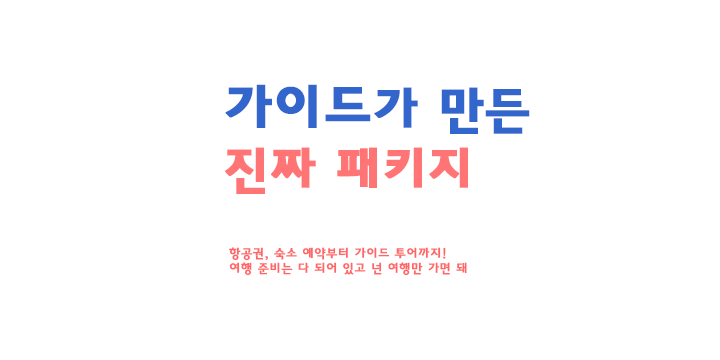
<style>
.page{position:relative;width:720px;height:360px;background:#ffffff}
.page>*{position:absolute;margin:0}
.t1{font:50px "HaanYGodic25";color:#ff7474;font-weight:bold}
.t2{font:53.6px "HaanYGodic25";color:#3366cc;font-weight:bold}
.t3{font:50px "HaanYGodic25";color:#3366cc;font-weight:bold}
.t4{font:12.7px "HaanYGodic23";color:#ff6666;font-weight:bold}
</style>
<div class="page">
<p class="t1" style="left:225px;top:84px;width:305px;height:110px"><span class="t2">가이드</span><span class="t3">가 만든<br></span>진짜 패키지</p>
<p class="t4" style="left:229px;top:247px;width:238px;height:29px">항공권, 숙소 예약부터 가이드 투어까지!<br>여행 준비는 다 되어 있고 넌 여행만 가면 돼</p>
</div>
